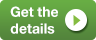
<style>
.page{position:relative;width:96px;height:40px}
.page>*{position:absolute;margin:0}
.t1{font:14px "HelveticaNeueLTStd-Bd";color:#ffffff}
.t2{font:14px "HelveticaNeueLTStd-Bd";letter-spacing:0.01em;color:#ffffff}
</style>
<div class="page">
<p class="t1" style="left:10px;top:6px;width:48px;height:28px">Get the <br><span class="t2">details</span></p>
</div>
